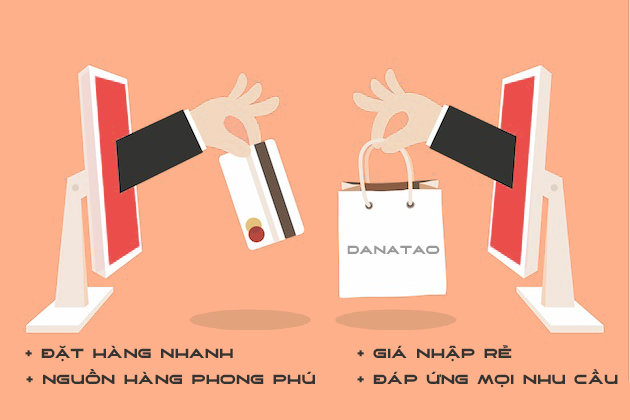
<style>
.page{position:relative;width:630px;height:420px;background:#fdb08a}
.page>*{position:absolute;margin:0}
.t1{font:18.5px "UTM-Aircona";color:#999999}
.t2{font:20.8px "UTM-Aircona";color:#333331}
</style>
<div class="page">
<p class="t1" style="left:347px;top:245px;width:93px;height:9px">danatao</p>
<p class="t2" style="left:25px;top:345px;width:208px;height:17px">+ đặt hàng nhanh</p>
<p class="t2" style="left:357px;top:345px;width:155px;height:17px">+ giá nhập rẻ</p>
<p class="t2" style="left:26px;top:369px;width:289px;height:15px">+ nguồn hàng phong phú</p>
<p class="t2" style="left:357px;top:369px;width:261px;height:19px">+ đáp ứng mọi nhu cầu</p>
</div>
